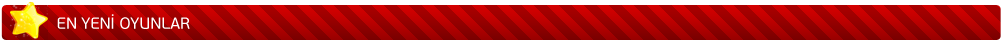
<style>
.page{position:relative;width:1008px;height:41px}
.page>*{position:absolute;margin:0}
.t1{font:16px "PFBeauSansPro-Regular";color:#ffffff}
</style>
<div class="page">
<p class="t1" style="left:57px;top:14px;width:133px;height:15px">EN YENİ OYUNLAR</p>
</div>
